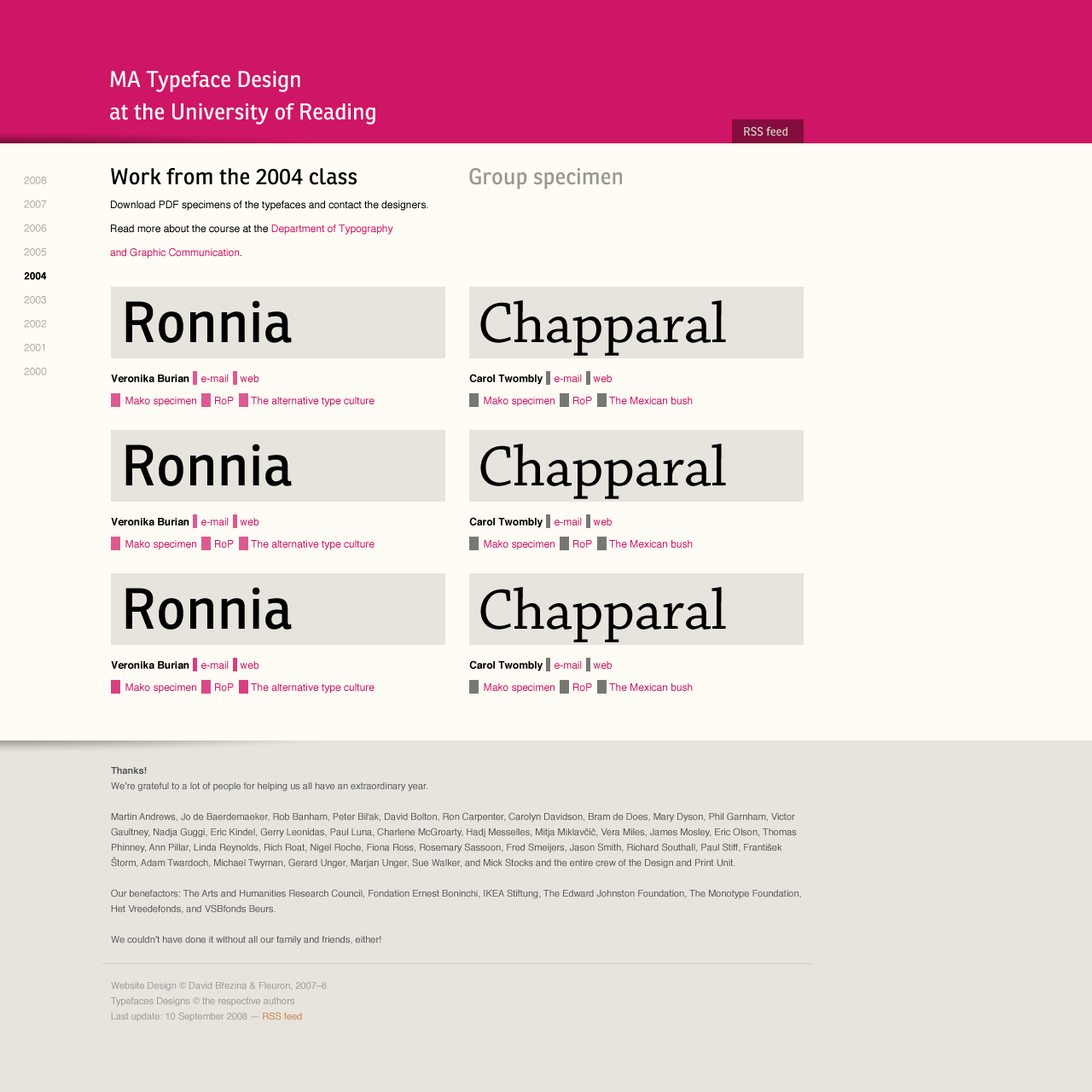
<style>
.page{position:relative;width:1092px;height:1092px;background:#fefcf4}
.page>*{position:absolute;margin:0}
.t1{font:22.2px/32.4px "Ronnia-Regular";color:#fefcf4}
.t2{font:11.9px "Ronnia-Regular";color:#cbcac3}
.t3{font:10.2px/23.9px "Helvetica";color:#000000}
.t4{font:22.2px/23.9px "Ronnia-Regular";color:#000000}
.t5{font:10.2px/23.9px "Helvetica";color:#cf1565}
.t6{font:22.2px "Ronnia-Regular";color:#989792}
.t7{font:10.2px/23.9px "Helvetica";color:#aaa8a3}
.t8{font:10.2px/23.9px "Helvetica-Bold";color:#000000}
.t9{font:56.3px "Ronnia-Regular";color:#000000}
.t10{font:59.7px "ChaparralPro-Regular";color:#000000}
.t11{font:10.2px/22.2px "Helvetica";color:#cf1565}
.t12{font:10.2px/22.2px "Helvetica-Bold";color:#010101}
.t13{font:9.4px/15.4px "Helvetica";color:#585858}
.t14{font:9.4px/15.4px "Helvetica-Bold";color:#585858}
.t15{font:9.4px/15.4px "Helvetica";color:#999999}
.t16{font:9.4px/15.4px "Helvetica";color:#cb7c4c}
</style>
<div class="page">
<p class="t1" style="left:110px;top:71px;width:265px;height:54px">MA Typeface Design<br>at the University of Reading</p>
<p class="t2" style="left:744px;top:126px;width:43px;height:10px">RSS feed</p>
<p class="t3" style="left:110px;top:168px;width:318px;height:90px"><span class="t4">Work from the 2004 class<br></span>Download PDF specimens of the typefaces and contact the designers.<br>Read more about the course at the <span class="t5">Department of Typography<br>and Graphic Communication</span>.</p>
<p class="t6" style="left:469px;top:168px;width:153px;height:21px">Group specimen</p>
<p class="t7" style="left:24px;top:177px;width:23px;height:198px">2008<br>2007<br>2006<br>2005<br><span class="t8">2004<br></span>2003<br>2002<br>2001<br>2000</p>
<p class="t9" style="left:125px;top:300px;width:167px;height:43px">Ronnia</p>
<p class="t10" style="left:480px;top:300px;width:246px;height:56px">Chapparal</p>
<p class="t11" style="left:111px;top:375px;width:264px;height:32px"><span class="t12">Veronika Burian    </span>e-mail    web<br>     Mako specimen      RoP      The alternative type culture</p>
<p class="t11" style="left:469px;top:374px;width:224px;height:33px"><span class="t12">Carol Twombly    </span>e-mail    web<br>     Mako specimen      RoP      The Mexican bush</p>
<p class="t9" style="left:125px;top:444px;width:167px;height:42px">Ronnia</p>
<p class="t10" style="left:480px;top:444px;width:246px;height:55px">Chapparal</p>
<p class="t11" style="left:111px;top:518px;width:264px;height:32px"><span class="t12">Veronika Burian    </span>e-mail    web<br>     Mako specimen      RoP      The alternative type culture</p>
<p class="t11" style="left:469px;top:517px;width:224px;height:33px"><span class="t12">Carol Twombly    </span>e-mail    web<br>     Mako specimen      RoP      The Mexican bush</p>
<p class="t9" style="left:125px;top:587px;width:167px;height:43px">Ronnia</p>
<p class="t10" style="left:480px;top:587px;width:246px;height:55px">Chapparal</p>
<p class="t11" style="left:111px;top:661px;width:264px;height:33px"><span class="t12">Veronika Burian    </span>e-mail    web<br>     Mako specimen      RoP      The alternative type culture</p>
<p class="t11" style="left:469px;top:660px;width:224px;height:34px"><span class="t12">Carol Twombly    </span>e-mail    web<br>     Mako specimen      RoP      The Mexican bush</p>
<p class="t13" style="left:111px;top:767px;width:690px;height:255px"><span class="t14">Thanks!<br></span>We’re grateful to a lot of people for helping us all have an extraordinary year.<br><br>Martin Andrews, Jo de Baerdemaeker, Rob Banham, Peter Biľak, David Bolton, Ron Carpenter, Carolyn Davidson, Bram de Does, Mary Dyson, Phil Garnham, Victor Gaultney, Nadja Guggi, Eric Kindel, Gerry Leonidas, Paul Luna, Charlene McGroarty, Hadj Messelles, Mitja Miklavčič, Vera Miles, James Mosley, Eric Olson, Thomas Phinney, Ann Pillar, Linda Reynolds, Rich Roat, Nigel Roche, Fiona Ross, Rosemary Sassoon, Fred Smeijers, Jason Smith, Richard Southall, Paul Stiff, František Štorm, Adam Twardoch, Michael Twyman, Gerard Unger, Marjan Unger, Sue Walker, and Mick Stocks and the entire crew of the Design and Print Unit.<br><br>Our benefactors: The Arts and Humanities Research Council, Fondation Ernest Boninchi, IKEA Stiftung, The Edward Johnston Foundation, The Monotype Foundation, Het Vreedefonds, and VSBfonds Beurs.<br><br>We couldn’t have done it without all our family and friends, either!<br><span class="t15"><br><br>Website Design © David Březina &amp; Fleuron, 2007–8<br>Typefaces Designs © the respective authors<br>Last update: 10 September 2008 — </span><span class="t16">RSS feed</span></p>
</div>
